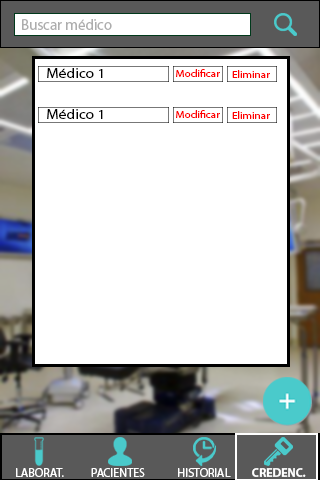
<style>
.page{position:relative;width:320px;height:480px;background:#ffffff}
.page>*{position:absolute;margin:0}
.t1{font:15px "MyriadPro-Regular";color:#adadad}
.t2{font:13.6px "MyriadPro-Regular";color:#000000;scale:1.13 1}
.t3{font:10px "MyriadPro-Regular";color:#ff0000;scale:1.13 1}
.t4{font:12px "MyriadPro-Regular";color:#ffffff}
.t5{font:12px "MyriadPro-Regular";color:#fefefe}
.t6{font:12px "MyriadPro-Bold";color:#ffffff}
</style>
<div class="page">
<p class="t1" style="left:22px;top:19px;width:90px;height:11px">Buscar médico</p>
<p class="t2" style="left:47px;top:68px;width:56px;height:10px">Médico 1</p>
<p class="t3" style="left:176px;top:69px;width:44px;height:8px">Modificar</p>
<p class="t3" style="left:232px;top:70px;width:38px;height:8px">Eliminar</p>
<p class="t2" style="left:47px;top:109px;width:56px;height:10px">Médico 1</p>
<p class="t3" style="left:176px;top:110px;width:44px;height:8px">Modificar</p>
<p class="t3" style="left:232px;top:111px;width:38px;height:8px">Eliminar</p>
<p class="t4" style="left:16px;top:468px;width:48px;height:9px">LABORAT.</p>
<p class="t4" style="left:91px;top:468px;width:54px;height:9px">PACIENTES</p>
<p class="t5" style="left:178px;top:468px;width:53px;height:9px">HISTORIAL</p>
<p class="t6" style="left:252px;top:468px;width:54px;height:9px">CREDENC.</p>
</div>
